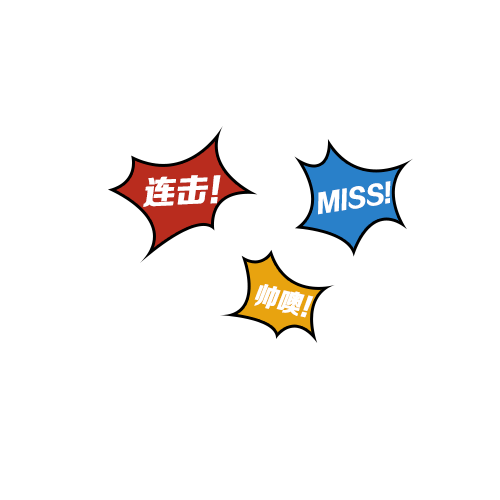
<style>
.page{position:relative;width:500px;height:500px;background:#ffffff}
.page>*{position:absolute;margin:0}
.t1{font:32.6px "FZZDHJW--GB1-0";color:#ffffff;font-style:italic}
.t2{font:25.1px "FZZDHJW--GB1-0";color:#ffffff;font-style:italic;scale:0.92 1}
.t3{font:25.9px "FZZDHJW--GB1-0";color:#ffffff;font-style:italic;scale:0.93 1}
</style>
<div class="page">
<p class="t1" style="left:143px;top:175px;width:78px;height:32px;rotate:-3deg">连击！</p>
<p class="t2" style="left:318px;top:181px;width:73px;height:34px;rotate:-9deg">MISS!</p>
<p class="t3" style="left:254px;top:284px;width:60px;height:34px;rotate:14deg">帅噢！</p>
</div>
